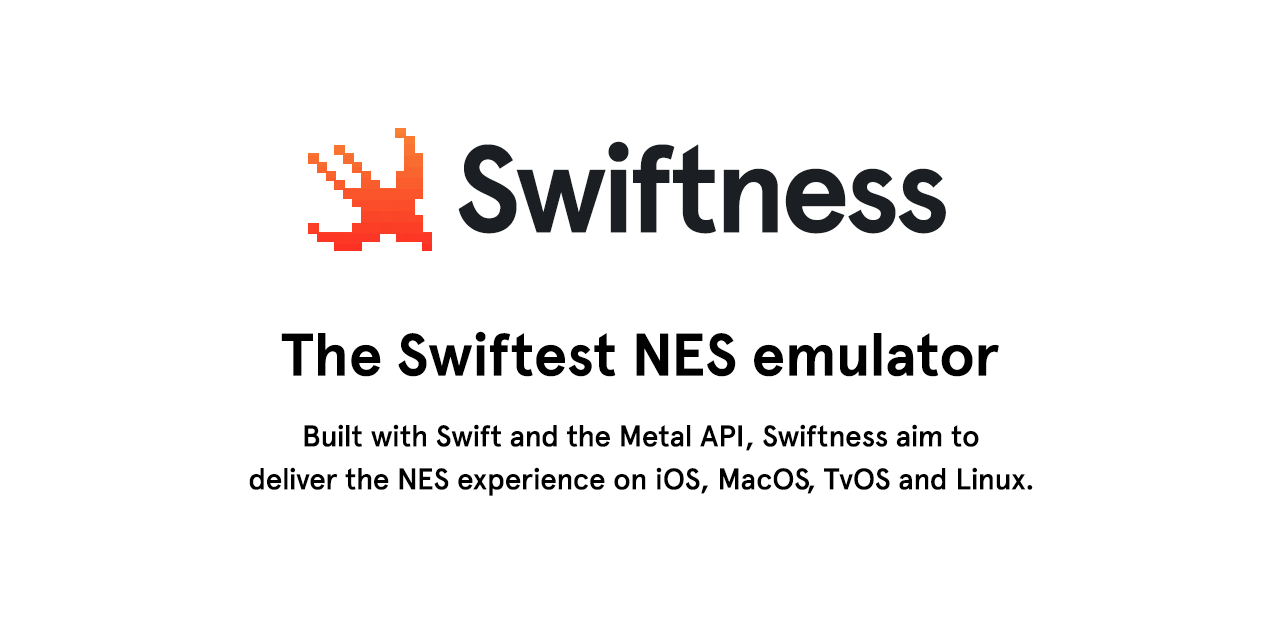
<style>
.page{position:relative;width:1280px;height:640px;background:#ffffff}
.page>*{position:absolute;margin:0}
.t1{font:124px "ApercuPro-Bold";letter-spacing:-0.045em;color:#1b1f23}
.t2{font:60px "ApercuPro-Bold";letter-spacing:-0.005em;color:#000000}
.t3{font:30px/43px "ApercuPro-Medium";letter-spacing:-0.005em;color:#000000}
</style>
<div class="page">
<p class="t1" style="left:458px;top:141px;width:488px;height:93px">Swiftness</p>
<p class="t2" style="left:281px;top:331px;width:718px;height:46px">The Swiftest NES emulator</p>
<p class="t3" style="left:249px;top:424px;width:784px;height:72px;text-align:center">Built with Swift and the Metal API, Swiftness aim to<br>deliver the NES experience on iOS, MacOS, TvOS and Linux.</p>
</div>
